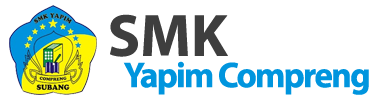
<style>
.page{position:relative;width:372px;height:100px;background:#ffffff}
.page>*{position:absolute;margin:0}
.t1{font:60px "MyriadPro-Bold";color:#3e3e3e}
.t2{font:36px "MyriadPro-Bold";letter-spacing:-0.05em;color:#0095de}
</style>
<div class="page">
<p class="t1" style="left:110px;top:14px;width:118px;height:43px">SMK</p>
<p class="t2" style="left:123px;top:61px;width:246px;height:34px">Yapim Compreng</p>
</div>
